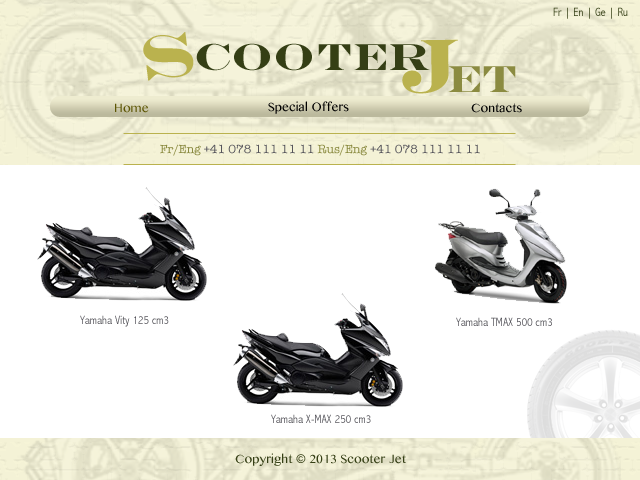
<style>
.page{position:relative;width:640px;height:480px;background:#ffffff}
.page>*{position:absolute;margin:0}
.t1{font:12px "AbadiMT-CondensedLight";letter-spacing:0.005em}
.t2{font:62.6px "EngraversMT-Bold";letter-spacing:0.005em;color:#bab24e}
.t3{font:77px "EngraversMT-Bold";letter-spacing:0.005em;color:#bab24e}
.t4{font:37.8px "EngraversMT-Bold";letter-spacing:0.005em;color:#353f15}
.t5{font:37.8px "EngraversMT-Bold";letter-spacing:0.005em;color:#8b8b41}
.t6{font:12px "BanglaMN";letter-spacing:0.005em;color:#000000}
.t7{font:12px "BanglaMN";letter-spacing:0.005em;color:#5d5604}
.t8{font:12px "BanglaMN";letter-spacing:0.005em;color:#010101}
.t9{font:12px "AmericanTypewriter";letter-spacing:0.005em;color:#56555b}
.t10{font:12px "AmericanTypewriter";letter-spacing:0.005em;color:#8b8b41}
.t11{font:12px "AbadiMT-CondensedLight";letter-spacing:0.005em;color:#56555b}
.t12{font:12px "BanglaMN";letter-spacing:0.005em}
.t13{font:12px "BanglaMN";letter-spacing:0.005em;color:#353f15}
</style>
<div class="page">
<p class="t1" style="left:553px;top:7px;width:75px;height:12px">Fr | En | Ge | Ru</p>
<p class="t2" style="left:143px;top:32px;width:51px;height:49px;rotate:-7deg">S</p>
<p class="t3" style="left:402px;top:39px;width:56px;height:55px;rotate:-1deg">J</p>
<p class="t4" style="left:196px;top:43px;width:234px;height:28px">cooter</p>
<p class="t5" style="left:448px;top:66px;width:68px;height:26px">et</p>
<p class="t6" style="left:268px;top:101px;width:81px;height:13px">Special Offers</p>
<p class="t7" style="left:115px;top:103px;width:34px;height:10px">Home</p>
<p class="t8" style="left:471px;top:103px;width:51px;height:10px">Contacts</p>
<p class="t9" style="left:160px;top:144px;width:320px;height:12px"><span class="t10">Fr/Eng </span>+41 078 111 11 11 <span class="t10">Rus/Eng </span>+41 078 111 11 11</p>
<p class="t11" style="left:80px;top:315px;width:89px;height:12px">Yamaha Vity 125 cm3</p>
<p class="t11" style="left:456px;top:317px;width:96px;height:9px">Yamaha TMAX 500 cm3</p>
<p class="t11" style="left:271px;top:414px;width:100px;height:9px">Yamaha X-MAX 250 cm3</p>
<p class="t12" style="left:235px;top:452px;width:171px;height:13px">Copyright © 2013 Scooter Jet</p>
<p class="t13" style="left:235px;top:453px;width:171px;height:13px">Copyright © 2013 Scooter Jet</p>
</div>
